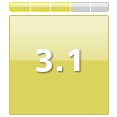
<style>
.page{position:relative;width:117px;height:117px;background:#dad35d}
.page>*{position:absolute;margin:0}
.t1{font:36px "Colaborate-Bold";color:#ffffff;text-transform:uppercase}
</style>
<div class="page">
<p class="t1" style="left:35px;top:49px;width:45px;height:23px">3.1</p>
</div>
